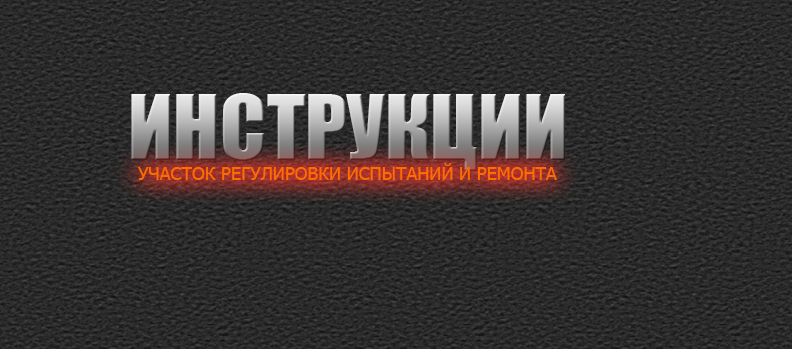
<style>
.page{position:relative;width:792px;height:349px}
.page>*{position:absolute;margin:0}
.t1{font:84px "Impact"}
.t2{font:18px "Tahoma";color:#ff6c00}
</style>
<div class="page">
<p class="t1" style="left:131px;top:93px;width:434px;height:78px">ИНСТРУКЦИИ</p>
<p class="t2" style="left:138px;top:163px;width:419px;height:17px">УЧАСТОК РЕГУЛИРОВКИ ИСПЫТАНИЙ И РЕМОНТА</p>
</div>
